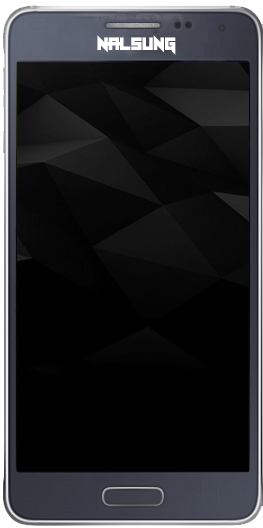
<style>
.page{position:relative;width:263px;height:528px;background:#000000}
.page>*{position:absolute;margin:0}
.t1{font:18px "Sheeping-Dogs";color:#ffffff}
</style>
<div class="page">
<p class="t1" style="left:97px;top:35px;width:79px;height:20px">NALSUNG</p>
</div>
